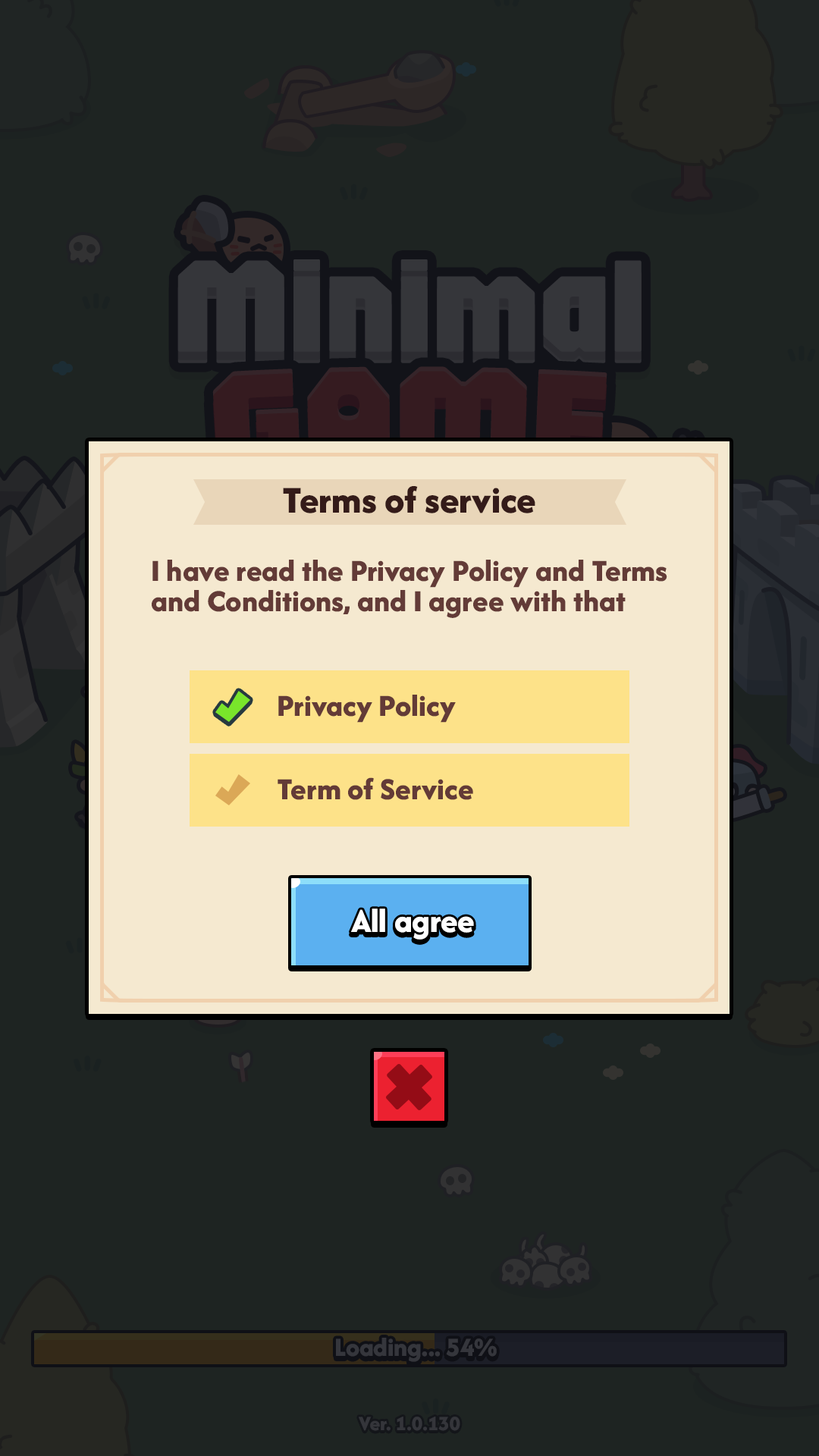
<style>
.page{position:relative;width:819px;height:1456px;background:#1e2422}
.page>*{position:absolute;margin:0}
.t1{font:39.4px "AfacadFlux-ExtraBold";color:#341b19}
.t2{font:31.8px/30.3px "AfacadFlux-ExtraBold";color:#633b37}
.t3{font:31.8px "AfacadFlux-ExtraBold";color:#633b37}
.t4{font:34.9px "AfacadFlux-ExtraBold";color:#ffffff}
</style>
<div class="page">
<p class="t1" style="left:283px;top:486px;width:252px;height:27px">Terms of service</p>
<p class="t2" style="left:152px;top:560px;width:515px;height:58px">I have read the Privacy Policy and Terms<br>and Conditions, and I agree with that</p>
<p class="t3" style="left:278px;top:695px;width:178px;height:28px">Privacy Policy</p>
<p class="t3" style="left:278px;top:777px;width:195px;height:23px">Term of Service</p>
<p class="t4" style="left:351px;top:908px;width:123px;height:32px">All agree</p>
</div>
